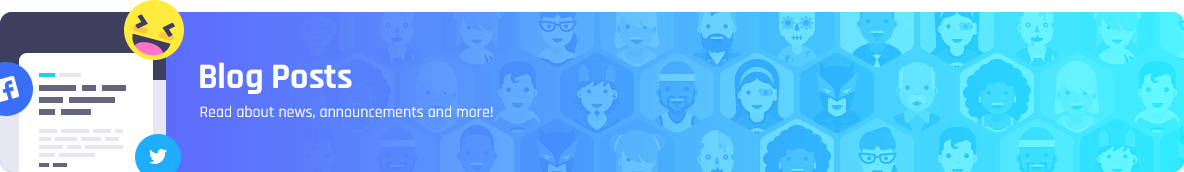
<style>
.page{position:relative;width:1184px;height:172px}
.page>*{position:absolute;margin:0}
.t1{font:36px "Rajdhani-Bold";color:#ffffff}
.t2{font:16px "Rajdhani-Medium";color:#ffffff}
</style>
<div class="page">
<p class="t1" style="left:200px;top:62px;width:152px;height:32px">Blog Posts</p>
<p class="t2" style="left:200px;top:105px;width:293px;height:14px">Read about news, announcements and more!</p>
</div>
